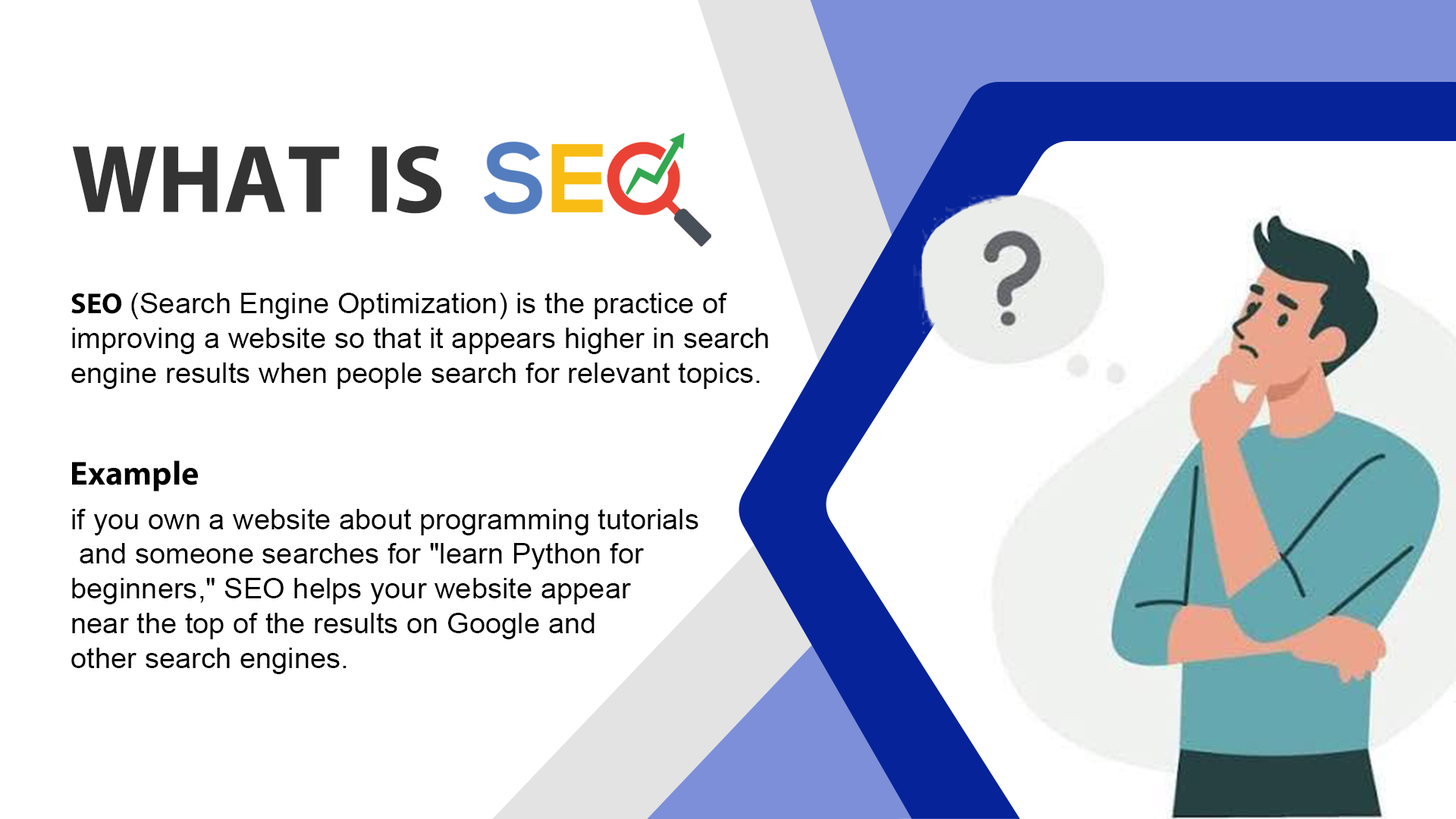
<style>
.page{position:relative;width:1456px;height:819px;background:#ffffff}
.page>*{position:absolute;margin:0}
.t1{font:96.8px "iKampuchea001_O'Chrov";color:#343434}
.t2{font:28.9px "ArialMT";color:#000000}
.t3{font:28.9px "iKampuchea001_O'Chrov";color:#000000}
.t4{font:33.6px "iKampuchea001_O'Chrov";color:#000000}
</style>
<div class="page">
<p class="t1" style="left:72px;top:146px;width:370px;height:68px">WHAT IS</p>
<p class="t2" style="left:71px;top:293px;width:697px;height:96px"><span class="t3">SEO </span>(Search Engine Optimization) is the practice of <br>improving a website so that it appears higher in search <br>engine results when people search for relevant topics.</p>
<p class="t4" style="left:72px;top:460px;width:126px;height:31px">Example</p>
<p class="t2" style="left:71px;top:509px;width:627px;height:165px">if you own a website about programming tutorials<br> and someone searches for "learn Python for <br>beginners," SEO helps your website appear <br>near the top of the results on Google and <br>other search engines.</p>
</div>
